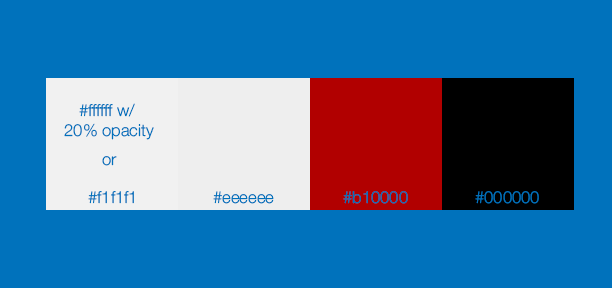
<style>
.page{position:relative;width:612px;height:288px;background:#0072bc}
.page>*{position:absolute;margin:0}
.t1{font:16.6px/6.7px "HelveticaNeue-Light";color:#0072bc}
.t2{font:16.6px "HelveticaNeue-Light";color:#0072bc}
</style>
<div class="page">
<p class="t1" style="left:64px;top:103px;width:90px;height:37px;text-align:center">#ffffff w/ <br><br><br>20% opacity</p>
<p class="t2" style="left:102px;top:156px;width:15px;height:10px">or</p>
<p class="t2" style="left:88px;top:191px;width:46px;height:13px">#f1f1f1</p>
<p class="t2" style="left:213px;top:191px;width:61px;height:13px">#eeeeee</p>
<p class="t2" style="left:343px;top:191px;width:65px;height:13px">#b10000</p>
<p class="t2" style="left:475px;top:191px;width:64px;height:13px">#000000</p>
</div>
